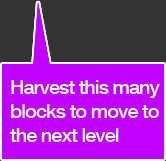
<style>
.page{position:relative;width:166px;height:161px;background:#c000ff}
.page>*{position:absolute;margin:0}
.t1{font:20px "HelveticaNeue-Medium";letter-spacing:-0.05em;color:#ffffff}
</style>
<div class="page">
<p class="t1" style="left:10px;top:80px;width:150px;height:62px">Harvest this many<br>blocks to move to <br>the next level</p>
</div>
